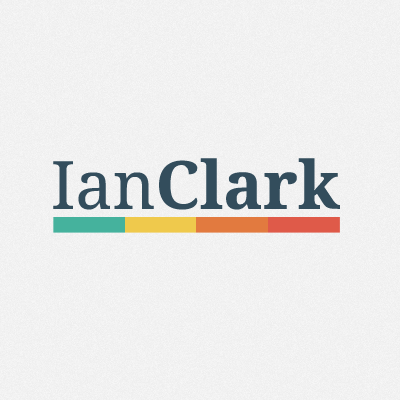
<style>
.page{position:relative;width:400px;height:400px;background:#f2f2f2}
.page>*{position:absolute;margin:0}
.t1{font:66.4px "DroidSerif-Bold";color:#334d5c}
.t2{font:66.4px "DroidSerif";color:#334d5c}
</style>
<div class="page">
<p class="t1" style="left:53px;top:158px;width:287px;height:52px"><span class="t2">Ian</span>Clark</p>
</div>
